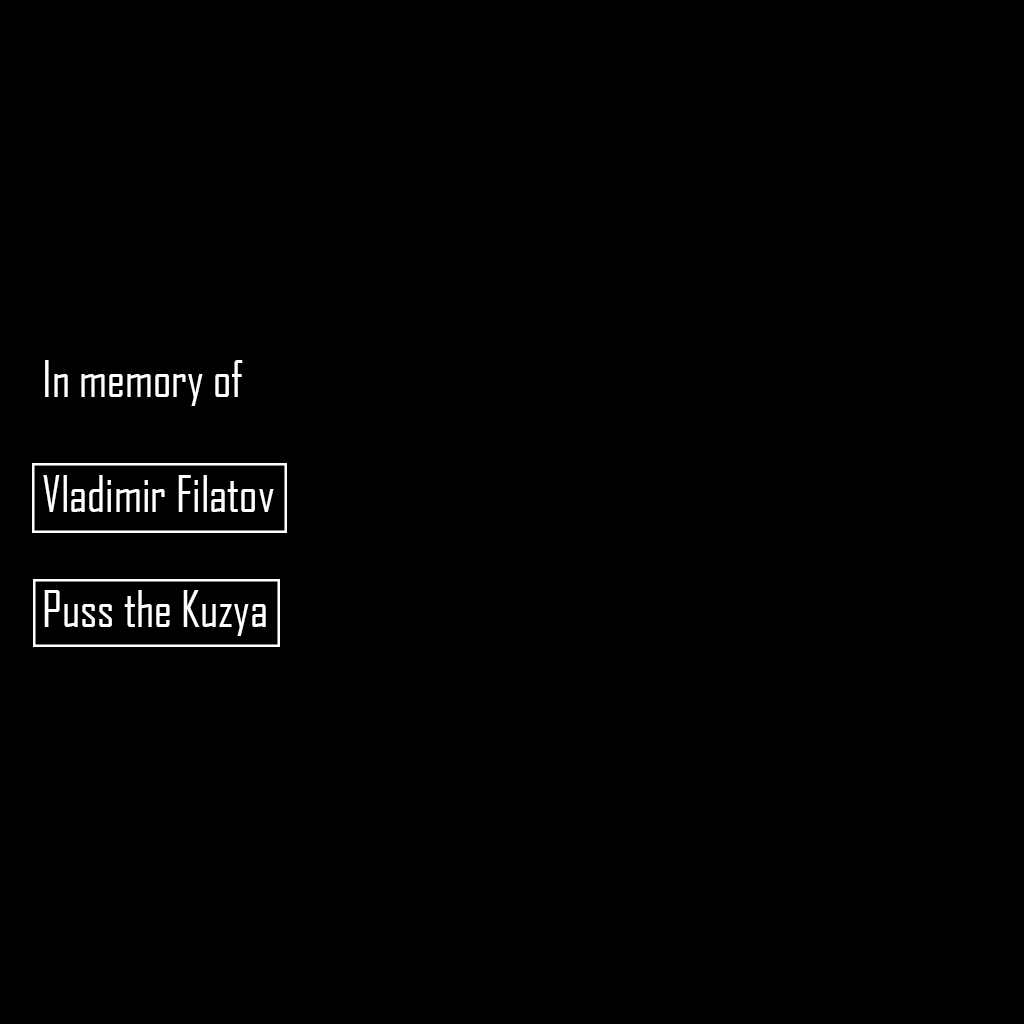
<style>
.page{position:relative;width:1024px;height:1024px;background:#000000}
.page>*{position:absolute;margin:0}
.t1{font:48px "AgencyFBCyrillic";color:#ffffff}
</style>
<div class="page">
<p class="t1" style="left:43px;top:360px;width:231px;height:276px">In memory of<br><br>Vladimir Filatov<br><br>Puss the Kuzya</p>
</div>
